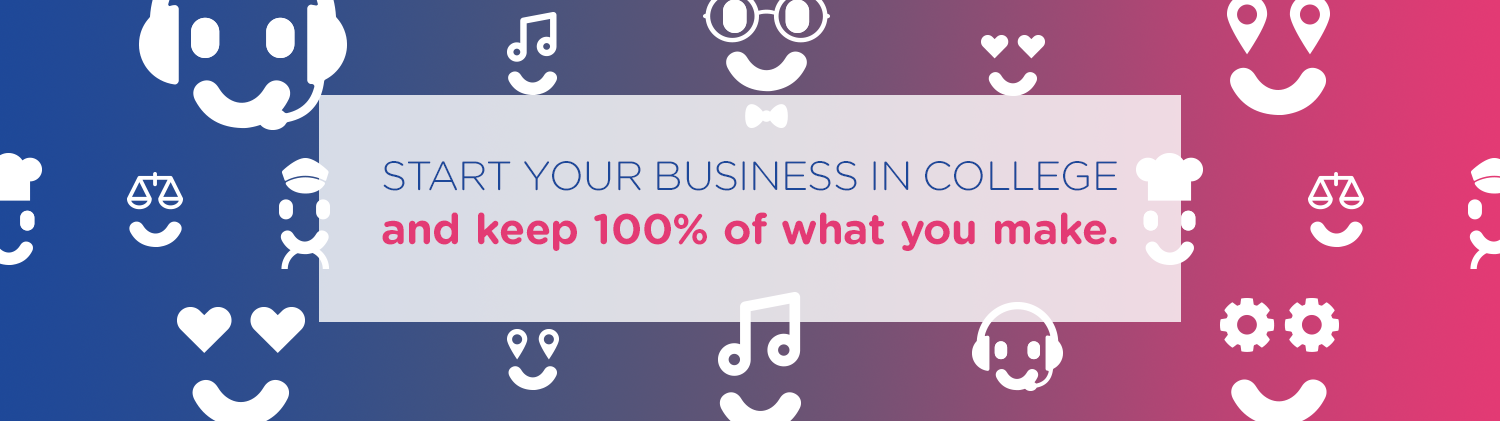
<style>
.page{position:relative;width:1500px;height:421px}
.page>*{position:absolute;margin:0}
.t1{font:42.7px/54.2px "GothamRounded-Bold";color:#e33a74}
.t2{font:40.9px/54.2px "GothamRounded-Light";color:#1d4899;text-transform:uppercase}
</style>
<div class="page">
<p class="t1" style="left:382px;top:161px;width:735px;height:90px;text-align:justify"><span class="t2">START YOUR BUSINESS IN COLLEGE<br></span>and keep 100% of what you make.</p>
</div>
